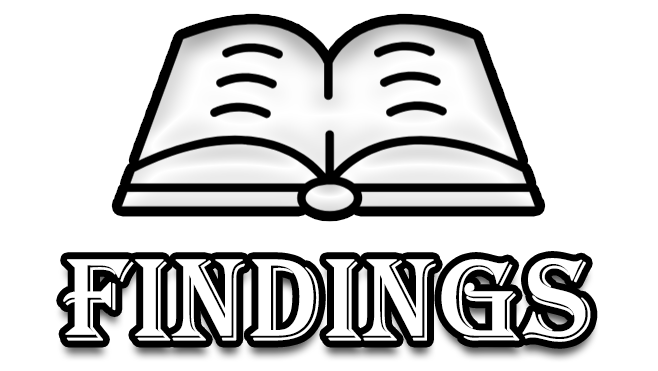
<style>
.page{position:relative;width:658px;height:371px;background:#ffffff}
.page>*{position:absolute;margin:0}
.t1{font:120px "Algerian";color:#ffffff;font-weight:bold}
</style>
<div class="page">
<p class="t1" style="left:63px;top:258px;width:528px;height:84px">FINDINGS</p>
</div>
